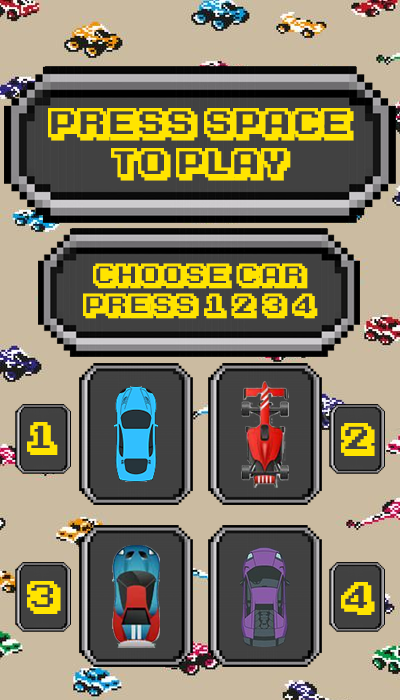
<style>
.page{position:relative;width:400px;height:700px;background:#cbbba1}
.page>*{position:absolute;margin:0}
.t1{font:33.3px "KarmaticArcade";color:#ffe400}
.t2{font:25px "KarmaticArcade";color:#ffe400;font-weight:bold}
.t3{font:33.3px "KarmaticArcade";color:#ffe400;font-weight:bold}
</style>
<div class="page">
<p class="t1" style="left:48px;top:108px;width:306px;height:73px;text-align:center">Press SPACE<br>to play</p>
<p class="t2" style="left:83px;top:263px;width:235px;height:56px;text-align:center">choose car<br>press 1 2 3 4</p>
<p class="t3" style="left:27px;top:422px;width:31px;height:33px">1</p>
<p class="t3" style="left:341px;top:423px;width:34px;height:33px">2</p>
<p class="t3" style="left:27px;top:581px;width:34px;height:33px">3</p>
<p class="t3" style="left:341px;top:582px;width:34px;height:33px">4</p>
</div>
